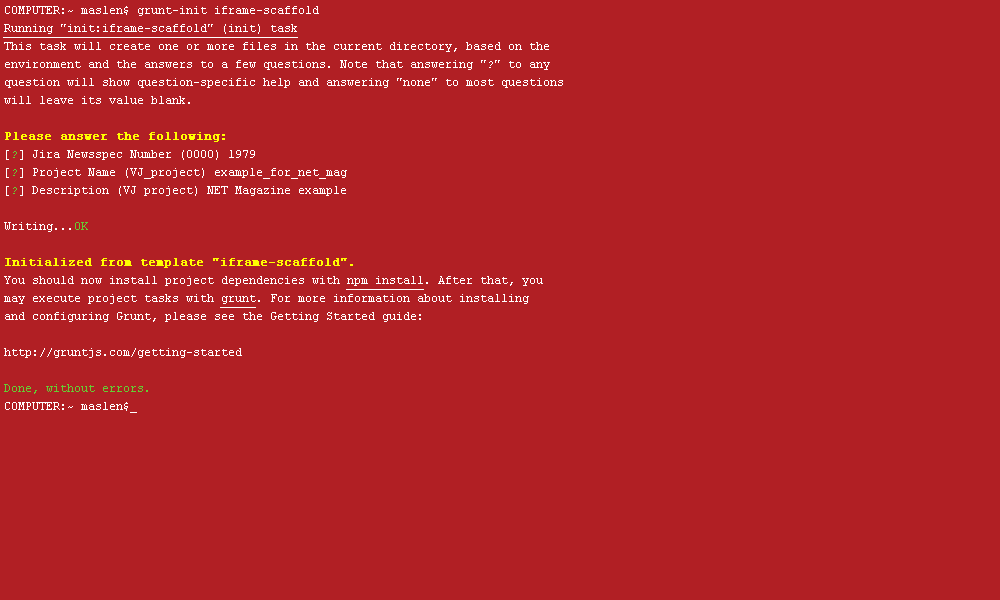
<style>
.page{position:relative;width:1000px;height:600px;background:#b11f24}
.page>*{position:absolute;margin:0}
.t1{font:12px/18px "CourierNewPSMT";color:#ffffff}
.t2{font:12px/18px "CourierNewPSMT";color:#ffffff;text-decoration:underline}
.t3{font:12px/18px "CourierNewPSMT";color:#ffff00;font-weight:bold}
.t4{font:12px/18px "CourierNewPSMT";color:#66cc33}
</style>
<div class="page">
<p class="t1" style="left:3px;top:6px;width:560px;height:407px">COMPUTER:~ maslen$ grunt-init iframe-scaffold<br><span class="t2">Running "init:iframe-scaffold" (init) task<br></span>This task will create one or more files in the current directory, based on the<br>environment and the answers to a few questions. Note that answering "?" to any<br>question will show question-specific help and answering "none" to most questions<br>will leave its value blank.<br><br><span class="t3">Please answer the following:<br></span>[<span class="t4">?</span>] Jira Newsspec Number (0000) 1979<br>[<span class="t4">?</span>] Project Name (VJ_project) example_for_net_mag<br>[<span class="t4">?</span>] Description (VJ project) NET Magazine example<br><br>Writing...<span class="t4">OK<br><br></span><span class="t3">Initialized from template "iframe-scaffold".<br></span>You should now install project dependencies with <span class="t2">npm install</span>. After that, you<br>may execute project tasks with <span class="t2">grunt</span>. For more information about installing<br>and configuring Grunt, please see the Getting Started guide:<br><br>http://gruntjs.com/getting-started<br><br><span class="t4">Done, without errors.<br></span>COMPUTER:~ maslen$_</p>
</div>
